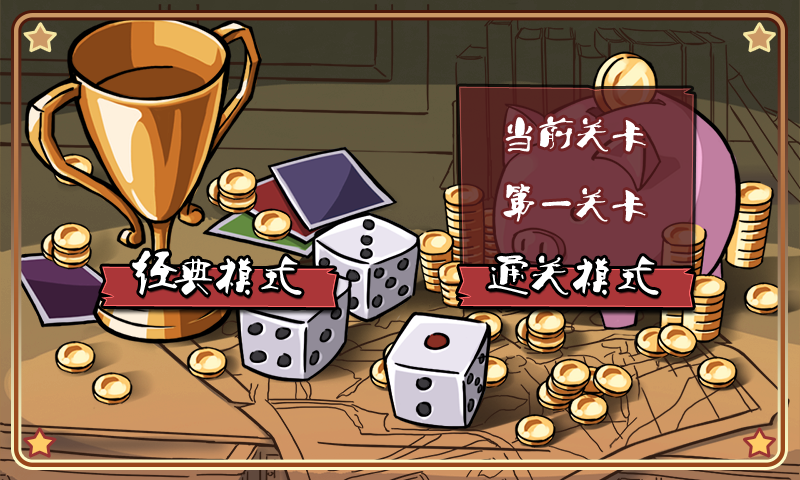
<style>
.page{position:relative;width:800px;height:480px}
.page>*{position:absolute;margin:0}
.t1{font:35px "Ò¶¸ùÓÑÌØÉ«¼òÌåÉý¼¶°æ";letter-spacing:0.05em;color:#ffffff}
.t2{font:40.6px "Ò¶¸ùÓÑÌØÉ«¼òÌåÉý¼¶°æ";letter-spacing:0.05em;color:#ffffff}
</style>
<div class="page">
<p class="t1" style="left:505px;top:116px;width:141px;height:36px">当前关卡</p>
<p class="t1" style="left:503px;top:183px;width:143px;height:39px">第一关卡</p>
<p class="t2" style="left:132px;top:250px;width:170px;height:45px">经典模式</p>
<p class="t2" style="left:488px;top:255px;width:171px;height:40px">通关模式</p>
</div>
